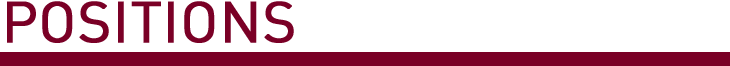
<style>
.page{position:relative;width:730px;height:66px;background:#ffffff}
.page>*{position:absolute;margin:0}
.t1{font:57px "DIN-Regular";color:#7a0026;text-transform:uppercase;font-weight:bold}
</style>
<div class="page">
<p class="t1" style="left:7px;top:1px;width:287px;height:42px">Positions</p>
</div>
